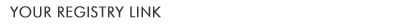
<style>
.page{position:relative;width:400px;height:24px;background:#ffffff}
.page>*{position:absolute;margin:0}
.t1{font:14.7px "FuturaBT-Light";letter-spacing:0.025em;color:#363636;text-transform:uppercase;font-weight:bold}
</style>
<div class="page">
<p class="t1" style="left:10px;top:6px;width:151px;height:12px">your registry link</p>
</div>
